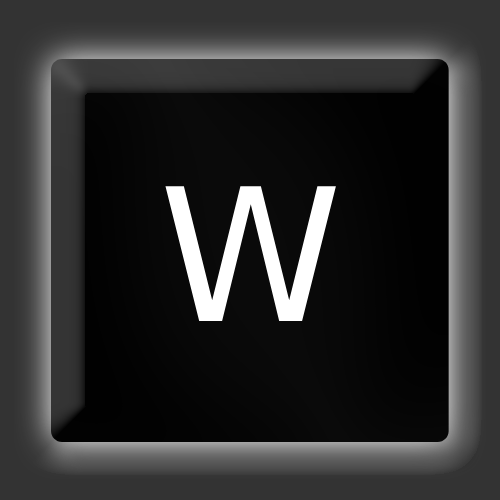
<style>
.page{position:relative;width:500px;height:500px}
.page>*{position:absolute;margin:0}
.t1{font:184.7px "DejaVuSans";color:#ffffff}
</style>
<div class="page">
<p class="t1" style="left:165px;top:186px;width:171px;height:135px">W</p>
</div>
